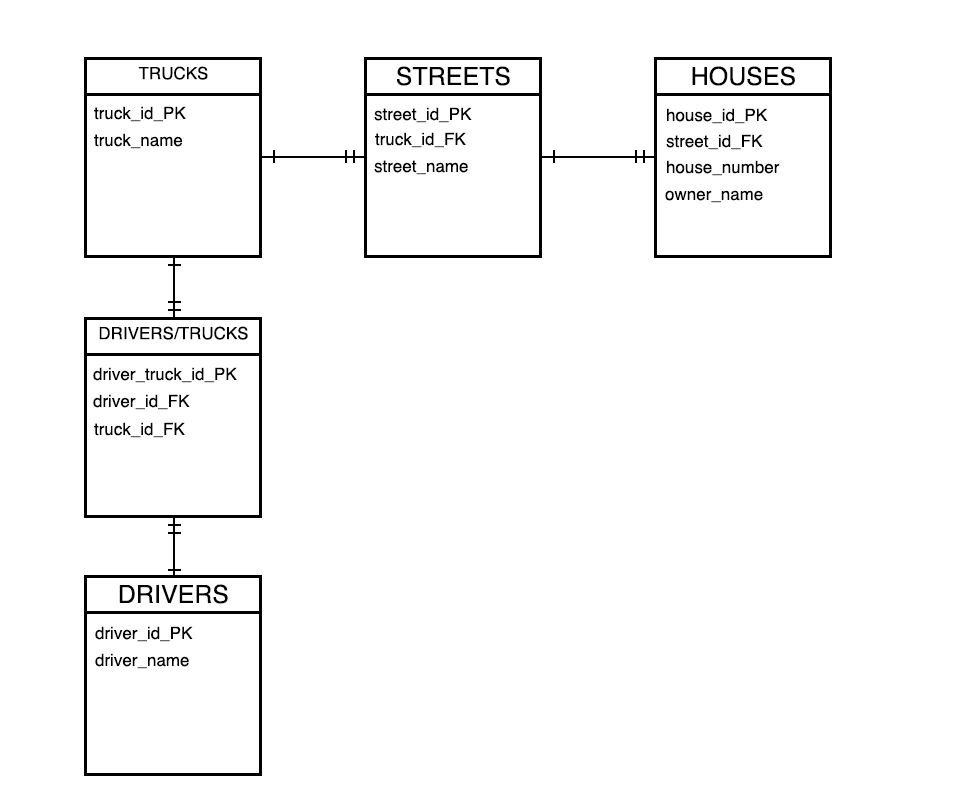
<style>
.page{position:relative;width:953px;height:800px;background:#ffffff}
.page>*{position:absolute;margin:0}
.t1{font:17px "Helvetica";color:#000000}
.t2{font:25px "Helvetica";color:#000000}
</style>
<div class="page">
<p class="t1" style="left:138px;top:66px;width:70px;height:14px">TRUCKS</p>
<p class="t2" style="left:397px;top:66px;width:113px;height:20px">STREETS</p>
<p class="t2" style="left:692px;top:66px;width:103px;height:20px">HOUSES</p>
<p class="t1" style="left:94px;top:106px;width:92px;height:16px">truck_id_PK</p>
<p class="t1" style="left:374px;top:107px;width:98px;height:16px">street_id_PK</p>
<p class="t1" style="left:667px;top:108px;width:101px;height:16px">house_id_PK</p>
<p class="t1" style="left:94px;top:133px;width:89px;height:16px">truck_name</p>
<p class="t1" style="left:375px;top:132px;width:91px;height:16px">truck_id_FK</p>
<p class="t1" style="left:666px;top:134px;width:97px;height:16px">street_id_FK</p>
<p class="t1" style="left:374px;top:160px;width:94px;height:15px">street_name</p>
<p class="t1" style="left:667px;top:160px;width:113px;height:16px">house_number</p>
<p class="t1" style="left:665px;top:190px;width:98px;height:13px">owner_name</p>
<p class="t1" style="left:99px;top:326px;width:149px;height:14px">DRIVERS/TRUCKS</p>
<p class="t1" style="left:93px;top:367px;width:144px;height:16px">driver_truck_id_PK</p>
<p class="t1" style="left:93px;top:394px;width:97px;height:16px">driver_id_FK</p>
<p class="t1" style="left:94px;top:422px;width:91px;height:16px">truck_id_FK</p>
<p class="t2" style="left:119px;top:584px;width:109px;height:20px">DRIVERS</p>
<p class="t1" style="left:95px;top:626px;width:98px;height:16px">driver_id_PK</p>
<p class="t1" style="left:95px;top:653px;width:94px;height:16px">driver_name</p>
</div>
